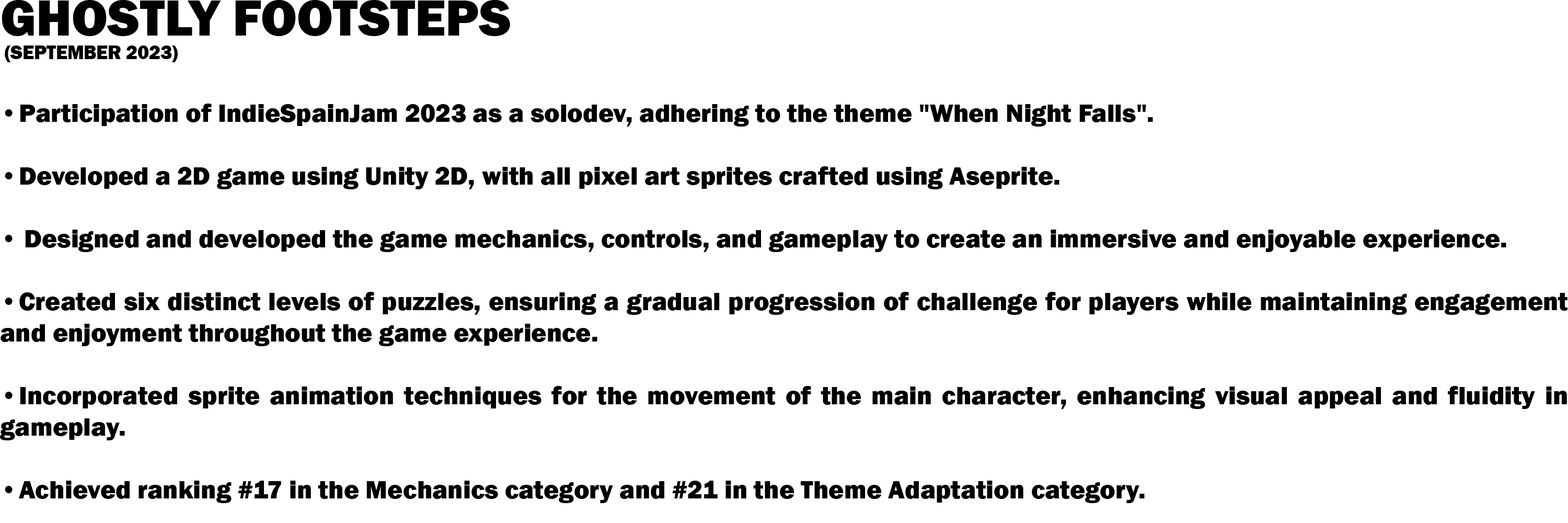
<style>
.page{position:relative;width:1568px;height:523px;background:#ffffff}
.page>*{position:absolute;margin:0}
.t1{font:26.1px "FranklinGothic-Heavy";color:#000000}
.t2{font:52.3px "FranklinGothic-Heavy";color:#000000}
.t3{font:19.6px "FranklinGothic-Heavy";color:#000000}
</style>
<div class="page">
<p class="t1" style="left:0px;top:0px;width:1567px;height:503px"><span class="t2">GHOSTLY FOOTSTEPS<br></span><span class="t3"> (SEPTEMBER 2023)<br></span><br>• Participation of IndieSpainJam 2023 as a solodev, adhering to the theme "When Night Falls".<br><br>• Developed a 2D game using Unity 2D, with all pixel art sprites crafted using Aseprite.<br><br>• Designed and developed the game mechanics, controls, and gameplay to create an immersive and enjoyable experience.<br><br>• Created six distinct levels of puzzles, ensuring a gradual progression of challenge for players while maintaining engagement and enjoyment throughout the game experience.<br><br>• Incorporated sprite animation techniques for the movement of the main character, enhancing visual appeal and fluidity in gameplay.<br><br>• Achieved ranking #17 in the Mechanics category and #21 in the Theme Adaptation category.</p>
</div>
